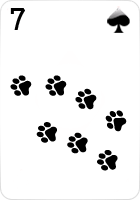
<style>
.page{position:relative;width:140px;height:200px;background:#ffffff}
.page>*{position:absolute;margin:0}
.t1{font:26px "CardCharacters";color:#000000}
</style>
<div class="page">
<p class="t1" style="left:10px;top:8px;width:15px;height:22px">7</p>
</div>
